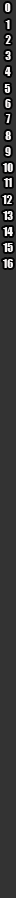
<style>
.page{position:relative;width:16px;height:898px;background:#333333}
.page>*{position:absolute;margin:0}
.t1{font:10.7px "Impact";color:#f7f5f5}
</style>
<div class="page">
<p class="t1" style="left:5px;top:3px;width:6px;height:9px">0</p>
<p class="t1" style="left:5px;top:20px;width:5px;height:9px">1</p>
<p class="t1" style="left:5px;top:35px;width:6px;height:9px">2</p>
<p class="t1" style="left:5px;top:51px;width:6px;height:9px">3</p>
<p class="t1" style="left:5px;top:67px;width:6px;height:9px">4</p>
<p class="t1" style="left:4px;top:84px;width:7px;height:9px">5</p>
<p class="t1" style="left:5px;top:99px;width:6px;height:9px">6</p>
<p class="t1" style="left:5px;top:114px;width:6px;height:9px">7</p>
<p class="t1" style="left:5px;top:131px;width:6px;height:9px">8</p>
<p class="t1" style="left:5px;top:147px;width:6px;height:9px">9</p>
<p class="t1" style="left:2px;top:163px;width:11px;height:9px">10</p>
<p class="t1" style="left:3px;top:178px;width:9px;height:9px">11</p>
<p class="t1" style="left:2px;top:195px;width:11px;height:9px">12</p>
<p class="t1" style="left:3px;top:211px;width:10px;height:9px">13</p>
<p class="t1" style="left:3px;top:227px;width:10px;height:9px">14</p>
<p class="t1" style="left:3px;top:243px;width:10px;height:9px">15</p>
<p class="t1" style="left:2px;top:259px;width:11px;height:9px">16</p>
</div>
